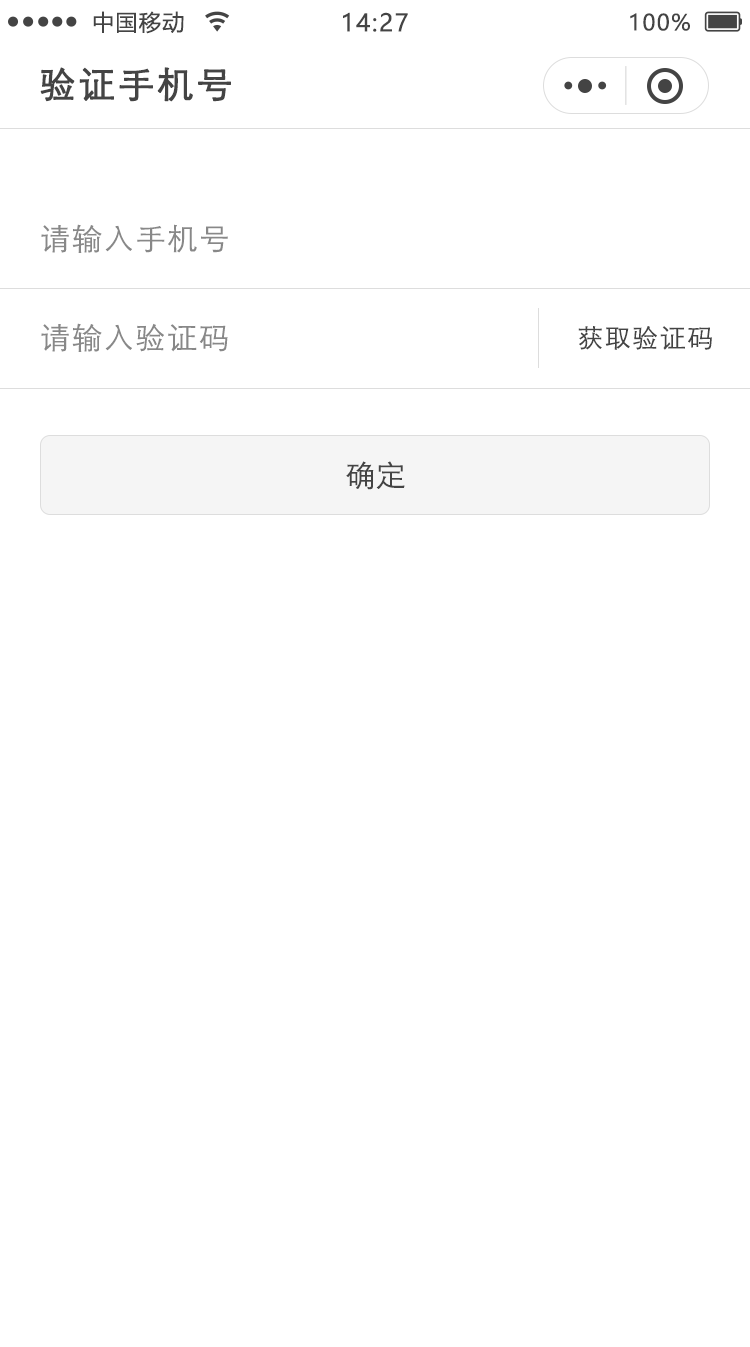
<style>
.page{position:relative;width:750px;height:1347px;background:#ffffff}
.page>*{position:absolute;margin:0}
.t1{font:22px "MicrosoftYaHei";letter-spacing:0.06em;color:#444444}
.t2{font:24px "MicrosoftYaHei";letter-spacing:0.06em;color:#444444}
.t3{font:36px "STXihei";letter-spacing:0.06em;color:#444444;font-weight:bold}
.t4{font:30px "STXihei";letter-spacing:0.06em;color:#888888}
.t5{font:26px "STXihei";letter-spacing:0.06em;color:#444444}
.t6{font:30px "STXihei";color:#444444}
</style>
<div class="page">
<p class="t1" style="left:93px;top:11px;width:91px;height:23px">中国移动</p>
<p class="t2" style="left:343px;top:12px;width:65px;height:20px">14:27</p>
<p class="t1" style="left:630px;top:13px;width:60px;height:18px">100%</p>
<p class="t3" style="left:40px;top:67px;width:191px;height:35px">验证手机号</p>
<p class="t4" style="left:41px;top:224px;width:187px;height:29px">请输入手机号</p>
<p class="t4" style="left:41px;top:323px;width:187px;height:29px">请输入验证码</p>
<p class="t5" style="left:578px;top:326px;width:134px;height:24px">获取验证码</p>
<p class="t6" style="left:346px;top:461px;width:59px;height:29px">确定</p>
</div>
